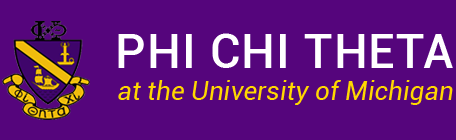
<style>
.page{position:relative;width:456px;height:140px;background:#55057c}
.page>*{position:absolute;margin:0}
.t1{font:47.8px "Roboto-Medium";letter-spacing:0.025em;color:#ffffff;text-transform:uppercase}
.t2{font:25.9px "Roboto-Italic";letter-spacing:0.005em;color:#ffd800}
</style>
<div class="page">
<p class="t1" style="left:118px;top:33px;width:335px;height:35px">Phi Chi Theta</p>
<p class="t2" style="left:118px;top:80px;width:335px;height:25px">at the University of Michigan</p>
</div>
